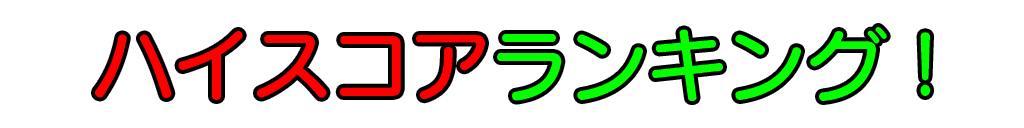
<style>
.page{position:relative;width:1024px;height:128px;background:#ffffff}
.page>*{position:absolute;margin:0}
.t1{font:79.2px "SeuratProN-DB";color:#06ff00}
.t2{font:79.2px "SeuratProN-DB";color:#ff0000}
</style>
<div class="page">
<p class="t1" style="left:95px;top:27px;width:835px;height:74px"><span class="t2">ハイスコア</span>ランキング！</p>
</div>
